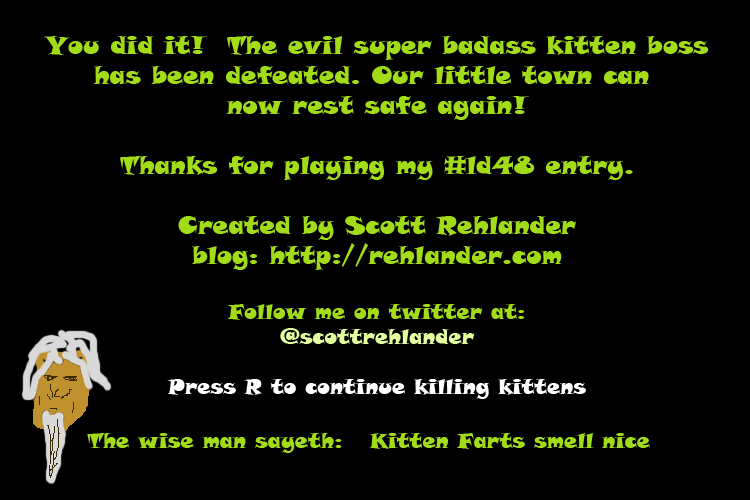
<style>
.page{position:relative;width:750px;height:500px;background:#000000}
.page>*{position:absolute;margin:0}
.t1{font:25px "SnapITC-Regular";color:#a2db18}
.t2{font:20.8px "SnapITC-Regular";color:#a2db18}
.t3{font:20.8px "SnapITC-Regular";color:#e2fe9f}
.t4{font:20.8px "SnapITC-Regular";color:#ffffff}
</style>
<div class="page">
<p class="t1" style="left:43px;top:36px;width:666px;height:363px;text-align:center">You did it!  The evil super badass kitten boss<br>has been defeated. Our little town can <br>now rest safe again!<br><br>Thanks for playing my #ld48 entry.<br><br>Created by Scott Rehlander<br>blog: http://rehlander.com<br><br><span class="t2">Follow me on twitter at:<br></span><span class="t3">@scottrehlander<br><br></span><span class="t4">Press R to continue killing kittens</span></p>
<p class="t2" style="left:87px;top:433px;width:255px;height:20px">The wise man sayeth:</p>
<p class="t2" style="left:369px;top:433px;width:281px;height:16px">Kitten Farts smell nice</p>
</div>
